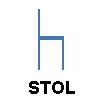
<style>
.page{position:relative;width:100px;height:100px;background:#ffffff}
.page>*{position:absolute;margin:0}
.t1{font:18px "Arial-BoldMT";color:#000000}
</style>
<div class="page">
<p class="t1" style="left:29px;top:81px;width:46px;height:13px">STOL</p>
</div>
